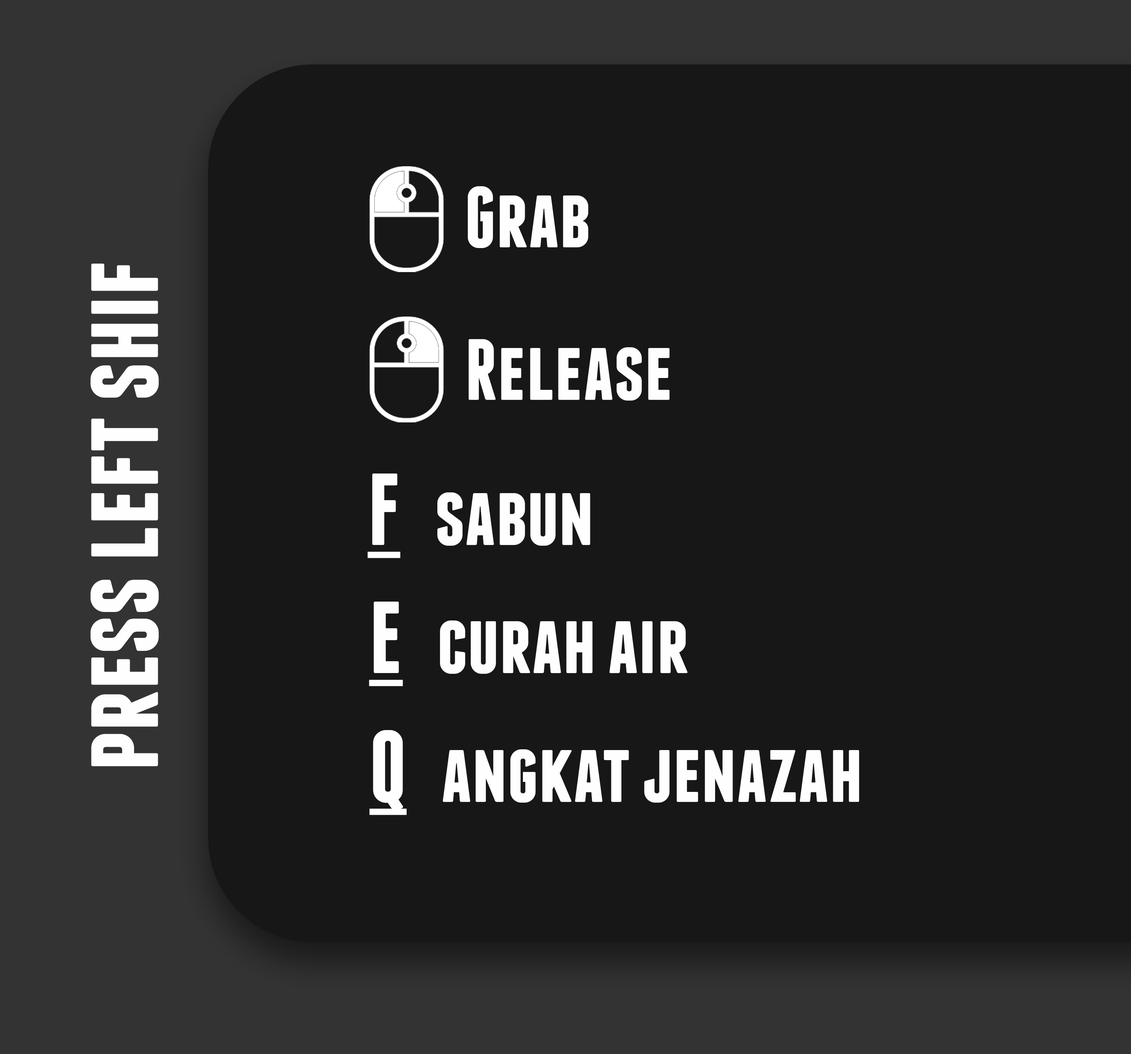
<style>
.page{position:relative;width:1131px;height:1054px;background:#171717}
.page>*{position:absolute;margin:0}
.t1{font:111.1px "Franchise-Bold";color:#fefefe}
.t2{font:86.7px "Franchise-Bold";color:#fefefe}
.t3{font:101.8px "Franchise-Bold";color:#fefefe;text-decoration:underline}
</style>
<div class="page">
<p class="t1" style="left:90px;top:264px;width:69px;height:503px;rotate:-90deg">press left shif</p>
<p class="t2" style="left:367px;top:474px;width:223px;height:84px"><span class="t3">F</span>   sabun</p>
<p class="t2" style="left:369px;top:602px;width:319px;height:85px"><span class="t3">E</span>   curah air</p>
<p class="t2" style="left:369px;top:730px;width:490px;height:85px"><span class="t3">Q</span>   angkat jenazah</p>
</div>
